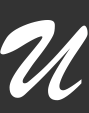
<style>
.page{position:relative;width:89px;height:113px;background:#333333}
.page>*{position:absolute;margin:0}
.t1{font:120px "BrushScriptMT";letter-spacing:0.1em;color:#ffffff}
</style>
<div class="page">
<p class="t1" style="left:0px;top:20px;width:88px;height:81px">U</p>
</div>
